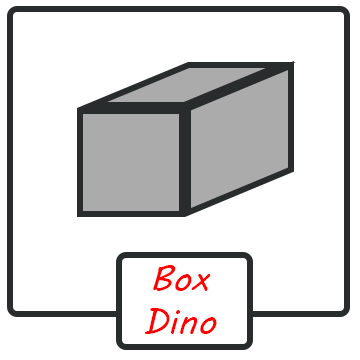
<style>
.page{position:relative;width:360px;height:360px;background:#ffffff}
.page>*{position:absolute;margin:0}
.t1{font:36px "MVBoli";color:#ff0000}
</style>
<div class="page">
<p class="t1" style="left:144px;top:265px;width:73px;height:69px;text-align:center">Box<br>Dino</p>
</div>
